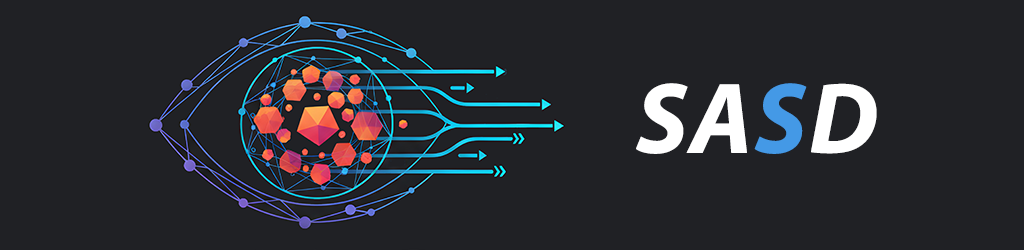
<style>
.page{position:relative;width:1024px;height:250px;background:#202125}
.page>*{position:absolute;margin:0}
.t1{font:101px "MyriadPro-BoldIt";color:#ffffff;font-weight:bold}
.t2{font:101px "MyriadPro-BoldIt";color:#4499e6;font-weight:bold}
</style>
<div class="page">
<p class="t1" style="left:636px;top:83px;width:241px;height:71px">SA<span class="t2">S</span>D</p>
</div>
